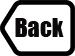
<style>
.page{position:relative;width:75px;height:56px;background:#ffffff}
.page>*{position:absolute;margin:0}
.t1{font:24.1px "Impact";color:#0b0909}
</style>
<div class="page">
<p class="t1" style="left:15px;top:18px;width:49px;height:19px">Back</p>
</div>
